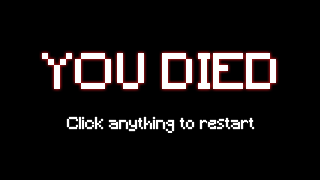
<style>
.page{position:relative;width:320px;height:180px;background:#000000}
.page>*{position:absolute;margin:0}
.t1{font:48px "Minecraft";color:#ffffff}
.t2{font:16px "Minecraft";color:#ffffff}
</style>
<div class="page">
<p class="t1" style="left:42px;top:53px;width:234px;height:36px">YOU DIED</p>
<p class="t2" style="left:66px;top:116px;width:189px;height:17px">Click anything to restart</p>
</div>
